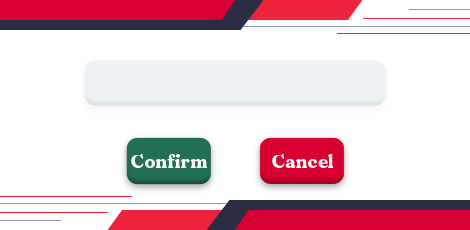
<style>
.page{position:relative;width:470px;height:230px;background:#ffffff}
.page>*{position:absolute;margin:0}
.t1{font:18px "MADEDillan";letter-spacing:0.025em;color:#f9f9f9}
</style>
<div class="page">
<p class="t1" style="left:131px;top:154px;width:77px;height:14px">Confirm</p>
<p class="t1" style="left:272px;top:154px;width:62px;height:14px">Cancel</p>
</div>
